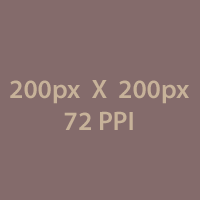
<style>
.page{position:relative;width:200px;height:200px;background:#846b6b}
.page>*{position:absolute;margin:0}
.t1{font:26.7px "MyriadPro-Semibold";color:#c7b299}
</style>
<div class="page">
<p class="t1" style="left:10px;top:80px;width:179px;height:50px;text-align:center">200px  X  200px<br>72 PPI</p>
</div>
